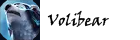
<style>
.page{position:relative;width:140px;height:40px;background:#ffffff}
.page>*{position:absolute;margin:0}
.t1{font:16px "VinerHandITC";color:#000000}
</style>
<div class="page">
<p class="t1" style="left:47px;top:10px;width:62px;height:17px">Volibear</p>
</div>
